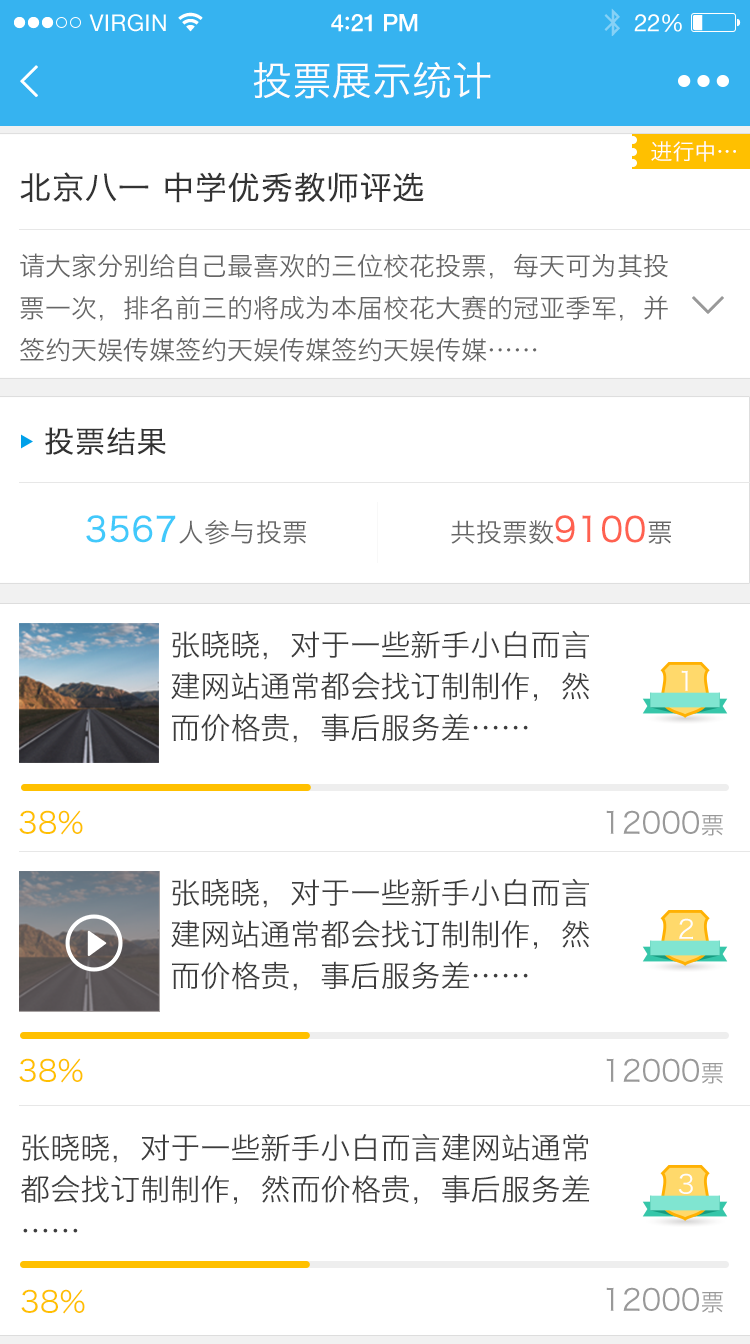
<style>
.page{position:relative;width:750px;height:1344px;background:#ffffff}
.page>*{position:absolute;margin:0}
.t1{font:40px "HiraginoSansGB-W3";color:#fefdfd}
.t2{font:22px "HiraginoSansGB-W3";color:#ffffff;text-transform:uppercase}
.t3{font:32px "HiraginoSansGB-W3";color:#333333;font-weight:bold}
.t4{font:26px/42px "HiraginoSansGB-W3";color:#666666;text-transform:uppercase}
.t5{font:30px "HiraginoSansGB-W3";color:#333333;font-weight:bold}
.t6{font:26px "HiraginoSansGB-W3";color:#666666;text-transform:uppercase}
.t7{font:34px "HiraginoSansGB-W3";color:#41c9fb;text-transform:uppercase;font-weight:bold}
.t8{font:34px "HiraginoSansGB-W3";color:#ff6150;text-transform:uppercase;font-weight:bold}
.t9{font:30px/41.5px "HiraginoSansGB-W3";color:#3d3d3d}
.t10{font:26px "HiraginoSansGB-W3";color:#fefdfd}
.t11{font:30px "HiraginoSansGB-W3";color:#ffc000}
.t12{font:30px "HiraginoSansGB-W3";color:#999999}
.t13{font:24px "HiraginoSansGB-W3";color:#999999}
</style>
<div class="page">
<p class="t1" style="left:253px;top:62px;width:238px;height:37px">投票展示统计</p>
<p class="t2" style="left:651px;top:141px;width:85px;height:21px">进行中…</p>
<p class="t3" style="left:20px;top:172px;width:404px;height:31px">北京八一 中学优秀教师评选</p>
<p class="t4" style="left:20px;top:253px;width:648px;height:109px">请大家分别给自己最喜欢的三位校花投票，每天可为其投<br>票一次，排名前三的将成为本届校花大赛的冠亚季军，并<br>签约天娱传媒签约天娱传媒签约天娱传媒……</p>
<p class="t5" style="left:45px;top:427px;width:121px;height:28px">投票结果</p>
<p class="t6" style="left:86px;top:515px;width:220px;height:30px"><span class="t7">3567</span>人参与投票</p>
<p class="t6" style="left:451px;top:515px;width:220px;height:29px">共投票数<span class="t8">9100</span>票</p>
<p class="t9" style="left:171px;top:630px;width:419px;height:113px">张晓晓，对于一些新手小白而言<br>建网站通常都会找订制制作，然<br>而价格贵，事后服务差……</p>
<p class="t10" style="left:681px;top:670px;width:7px;height:21px">1</p>
<p class="t11" style="left:19px;top:810px;width:64px;height:25px">38%</p>
<p class="t12" style="left:606px;top:810px;width:117px;height:26px">12000<span class="t13">票</span></p>
<p class="t9" style="left:171px;top:878px;width:419px;height:113px">张晓晓，对于一些新手小白而言<br>建网站通常都会找订制制作，然<br>而价格贵，事后服务差……</p>
<p class="t10" style="left:679px;top:918px;width:14px;height:21px">2</p>
<p class="t11" style="left:19px;top:1058px;width:64px;height:25px">38%</p>
<p class="t12" style="left:606px;top:1058px;width:117px;height:26px">12000<span class="t13">票</span></p>
<p class="t9" style="left:21px;top:1133px;width:569px;height:100px">张晓晓，对于一些新手小白而言建网站通常<br>都会找订制制作，然而价格贵，事后服务差<br>……</p>
<p class="t10" style="left:678px;top:1173px;width:15px;height:21px">3</p>
<p class="t11" style="left:21px;top:1289px;width:64px;height:25px">38%</p>
<p class="t12" style="left:606px;top:1287px;width:117px;height:26px">12000<span class="t13">票</span></p>
</div>
